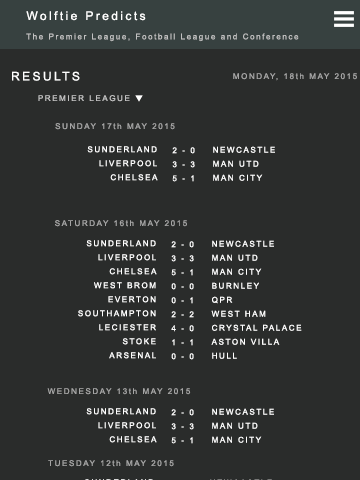
<style>
.page{position:relative;width:360px;height:480px;background:#2a2c2b}
.page>*{position:absolute;margin:0}
.t1{font:12px "ArialMT";letter-spacing:0.2em;color:#ffffff}
.t2{font:8px "ArialMT";letter-spacing:0.2em;color:#c2c2c2}
.t3{font:8px "ArialMT";letter-spacing:0.2em;color:#a5a5a5}
.t4{font:8px/14px "ArialMT";letter-spacing:0.2em;color:#ffffff}
</style>
<div class="page">
<p class="t1" style="left:26px;top:11px;width:120px;height:10px">Wolftie Predicts</p>
<p class="t2" style="left:26px;top:33px;width:273px;height:9px">The Premier League, Football League and Conference</p>
<p class="t1" style="left:12px;top:71px;width:68px;height:10px">RESULTS</p>
<p class="t3" style="left:233px;top:73px;width:124px;height:8px">MONDAY, 18th MAY 2015</p>
<p class="t2" style="left:38px;top:95px;width:92px;height:7px">PREMIER LEAGUE</p>
<p class="t3" style="left:55px;top:123px;width:120px;height:7px">SUNDAY 17th MAY 2015</p>
<p class="t4" style="left:87px;top:146px;width:71px;height:35px;text-align:right">SUNDERLAND<br>LIVERPOOL<br>CHELSEA</p>
<p class="t4" style="left:172px;top:147px;width:23px;height:35px;text-align:center">2 - 0<br>3 - 3<br>5 - 1</p>
<p class="t4" style="left:213px;top:146px;width:62px;height:35px">NEWCASTLE<br>MAN UTD<br>MAN CITY</p>
<p class="t3" style="left:55px;top:220px;width:132px;height:7px">SATURDAY 16th MAY 2015</p>
<p class="t4" style="left:78px;top:240px;width:79px;height:119px;text-align:right">SUNDERLAND<br>LIVERPOOL<br>CHELSEA<br>WEST BROM<br>EVERTON<br>SOUTHAMPTON<br>LECIESTER<br>STOKE<br>ARSENAL</p>
<p class="t4" style="left:171px;top:241px;width:23px;height:119px;text-align:center">2 - 0<br>3 - 3<br>5 - 1<br>0 - 0<br>0 - 1<br>2 - 2<br>4 - 0<br>1 - 1<br>0 - 0</p>
<p class="t4" style="left:211px;top:240px;width:91px;height:119px">NEWCASTLE<br>MAN UTD<br>MAN CITY<br>BURNLEY<br>QPR<br>WEST HAM<br>CRYSTAL PALACE<br>ASTON VILLA<br>HULL</p>
<p class="t3" style="left:47px;top:388px;width:144px;height:7px">WEDNESDAY 13th MAY 2015</p>
<p class="t4" style="left:86px;top:408px;width:71px;height:35px;text-align:right">SUNDERLAND<br>LIVERPOOL<br>CHELSEA</p>
<p class="t4" style="left:171px;top:409px;width:23px;height:35px;text-align:center">2 - 0<br>3 - 3<br>5 - 1</p>
<p class="t4" style="left:212px;top:408px;width:62px;height:35px">NEWCASTLE<br>MAN UTD<br>MAN CITY</p>
<p class="t3" style="left:48px;top:460px;width:126px;height:7px">TUESDAY 12th MAY 2015</p>
</div>
